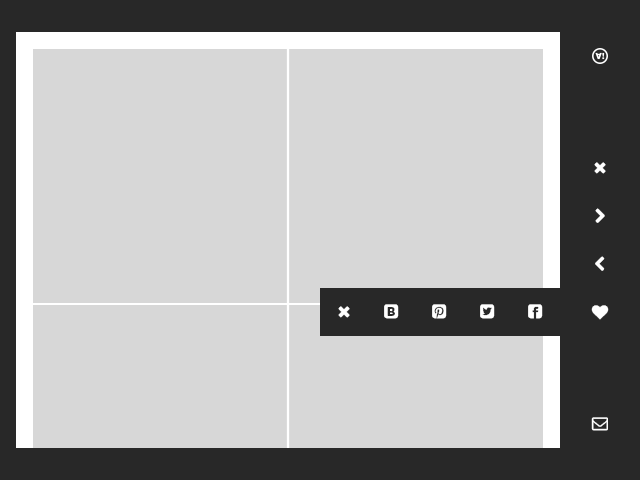
<style>
.page{position:relative;width:640px;height:480px;background:#d7d7d7}
.page>*{position:absolute;margin:0}
.t1{font:12px "HelveticaNeueCyr-Heavy";color:#282828}
</style>
<div class="page">
<p class="t1" style="left:387px;top:307px;width:8px;height:9px">В</p>
</div>
